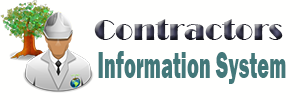
<style>
.page{position:relative;width:300px;height:100px;background:#fffffe}
.page>*{position:absolute;margin:0}
.t1{font:30px "Broadway"}
.t2{font:37.9px "FranklinGothic-Heavy";color:#43787a;scale:0.54 1}
</style>
<div class="page">
<p class="t1" style="left:94px;top:19px;width:189px;height:21px">Contractors</p>
<p class="t2" style="left:98px;top:51px;width:188px;height:33px">Information System</p>
</div>
